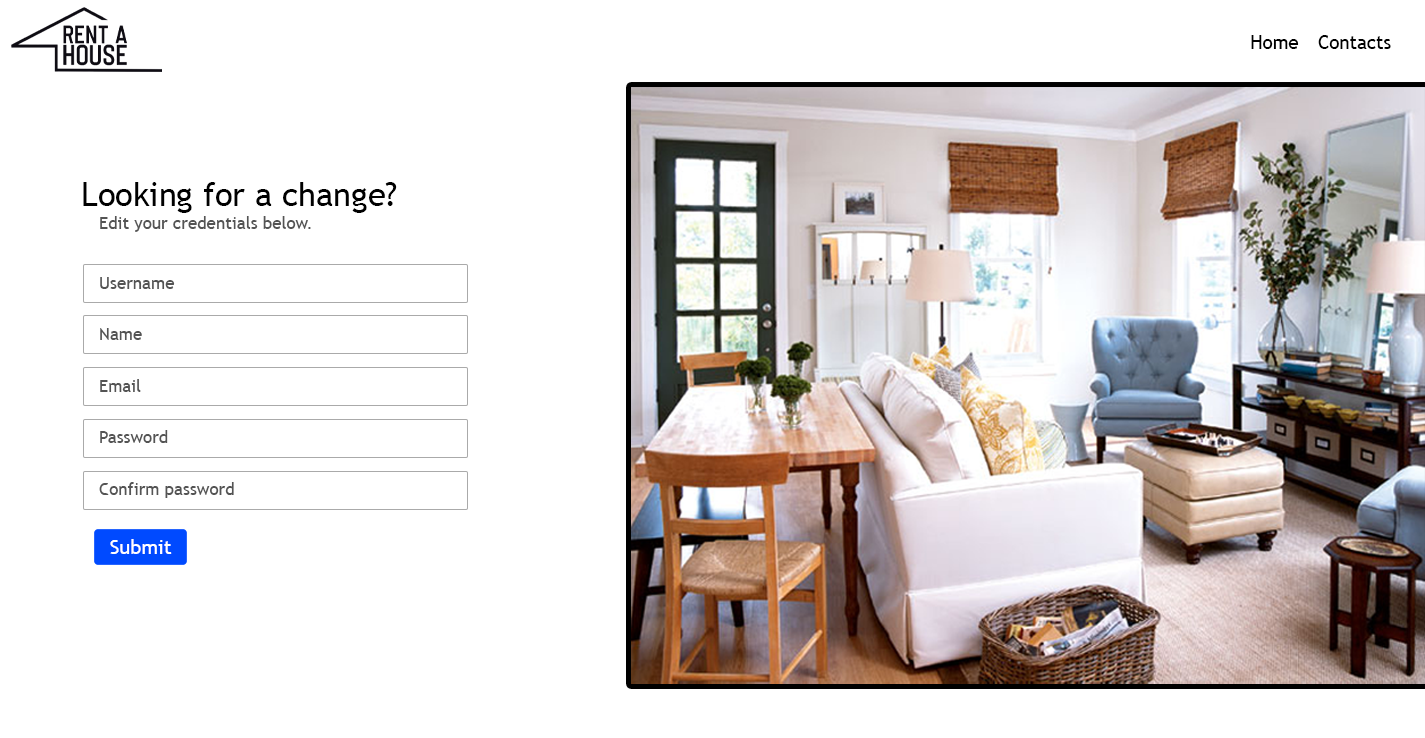
<style>
.page{position:relative;width:1425px;height:738px;background:#ffffff}
.page>*{position:absolute;margin:0}
.t1{font:18.7px "TrebuchetMS";color:#000000}
.t2{font:32.7px "TrebuchetMS";color:#000000}
.t3{font:17px "TrebuchetMS";color:#545454}
</style>
<div class="page">
<p class="t1" style="left:1251px;top:35px;width:48px;height:14px">Home</p>
<p class="t1" style="left:1318px;top:35px;width:73px;height:14px">Contacts</p>
<p class="t2" style="left:83px;top:182px;width:314px;height:31px">Looking for a change?</p>
<p class="t3" style="left:100px;top:216px;width:211px;height:16px">Edit your credentials below.</p>
<p class="t3" style="left:100px;top:277px;width:75px;height:12px">Username</p>
<p class="t3" style="left:100px;top:328px;width:42px;height:12px">Name</p>
<p class="t3" style="left:100px;top:379px;width:41px;height:13px">Email</p>
<p class="t3" style="left:100px;top:430px;width:68px;height:13px">Password</p>
<p class="t3" style="left:99px;top:482px;width:135px;height:16px">Confirm password</p>
</div>
